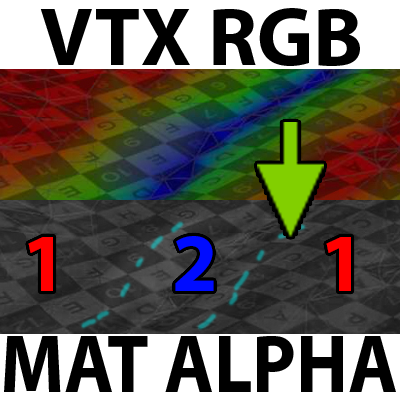
<style>
.page{position:relative;width:400px;height:400px;background:#ffffff}
.page>*{position:absolute;margin:0}
.t1{font:82.4px "MyriadPro-Bold";color:#000000}
.t2{font:82.4px "MyriadPro-Bold";color:#ff0000}
.t3{font:82.4px "MyriadPro-Bold";color:#000cff}
.t4{font:83.7px "MyriadPro-Bold";color:#000000;scale:0.9 1}
</style>
<div class="page">
<p class="t1" style="left:40px;top:8px;width:320px;height:58px">VTX RGB</p>
<p class="t2" style="left:28px;top:237px;width:25px;height:54px">1</p>
<p class="t3" style="left:175px;top:236px;width:39px;height:55px">2</p>
<p class="t2" style="left:326px;top:237px;width:25px;height:54px">1</p>
<p class="t4" style="left:4px;top:336px;width:392px;height:56px">MAT ALPHA</p>
</div>
